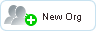
<style>
.page{position:relative;width:96px;height:31px;background:#ffffff}
.page>*{position:absolute;margin:0}
.t1{font:10px "ArialMT";color:#36292a}
</style>
<div class="page">
<p class="t1" style="left:43px;top:13px;width:38px;height:9px">New Org</p>
</div>
